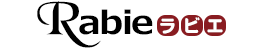
<style>
.page{position:relative;width:270px;height:50px;background:#ffffff}
.page>*{position:absolute;margin:0}
.t1{font:46.3px "BlackChancery";letter-spacing:-0.04em;color:#000000}
.t2{font:31.9px "Meiryo-Bold";letter-spacing:-0.04em;color:#000000;scale:1.13 1}
.t3{font:17.3px "ShinMGoPro-Bold";letter-spacing:-0.04em;color:#ffffff;scale:0.96 1}
</style>
<div class="page">
<p class="t1" style="left:37px;top:1px;width:64px;height:47px">R</p>
<p class="t2" style="left:79px;top:9px;width:74px;height:26px">abie</p>
<p class="t3" style="left:185px;top:17px;width:15px;height:16px">ビ</p>
<p class="t3" style="left:160px;top:18px;width:15px;height:16px">ラ</p>
<p class="t3" style="left:207px;top:19px;width:16px;height:14px">エ</p>
</div>
